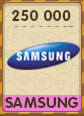
<style>
.page{position:relative;width:84px;height:116px;background:#eadab4}
.page>*{position:absolute;margin:0}
.t1{font:15px "RotondaC-Bold";letter-spacing:0.04em;color:#43341d;text-transform:uppercase}
</style>
<div class="page">
<p class="t1" style="left:12px;top:10px;width:59px;height:11px">250 000</p>
<p class="t1" style="left:5px;top:97px;width:73px;height:11px">Samsung</p>
</div>
